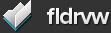
<style>
.page{position:relative;width:111px;height:33px;background:#333333}
.page>*{position:absolute;margin:0}
.t1{font:24px "ProximaNova-Bold";letter-spacing:-0.05em;color:#ffffff}
</style>
<div class="page">
<p class="t1" style="left:47px;top:7px;width:63px;height:17px">fldrvw</p>
</div>
